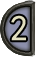
<style>
.page{position:relative;width:36px;height:57px;background:#ffffff}
.page>*{position:absolute;margin:0}
.t1{font:36px "SimHei";color:#e1debf}
</style>
<div class="page">
<p class="t1" style="left:11px;top:15px;width:15px;height:26px">2</p>
</div>
